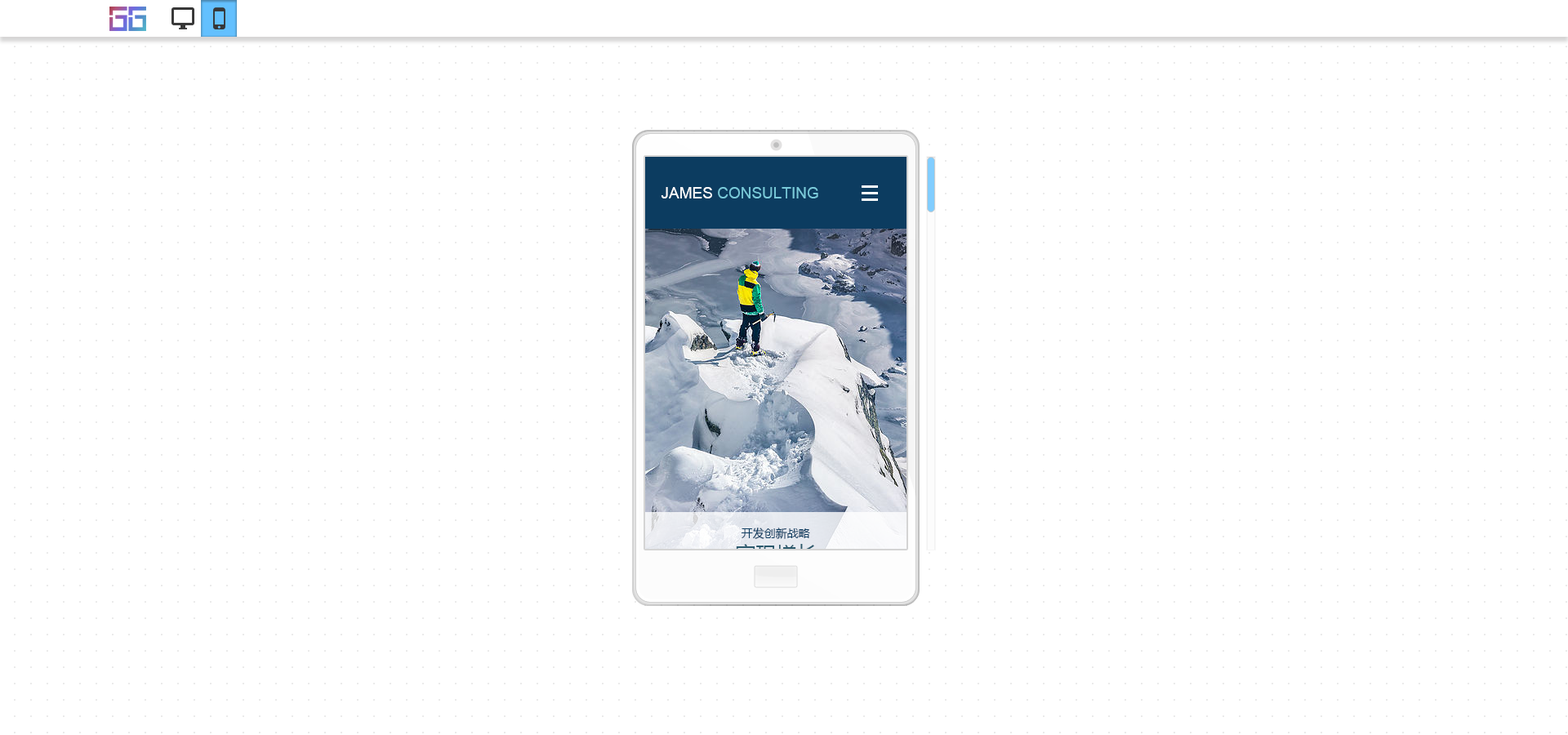
<style>
.page{position:relative;width:1568px;height:735px;background:#ffffff}
.page>*{position:absolute;margin:0}
.t1{font:15.5px "ArialMT";color:#79cada}
.t2{font:15.5px "ArialMT";color:#ffffff}
.t3{font:11.4px "MicrosoftYaHei";color:#0c3c60}
.t4{font:20.4px "MicrosoftYaHei"}
</style>
<div class="page">
<p class="t1" style="left:661px;top:187px;width:157px;height:11px"><span class="t2">JAMES </span>CONSULTING</p>
<p class="t3" style="left:741px;top:528px;width:69px;height:11px">开发创新战略</p>
<p class="t4" style="left:736px;top:544px;width:81px;height:20px">实现增长</p>
</div>
